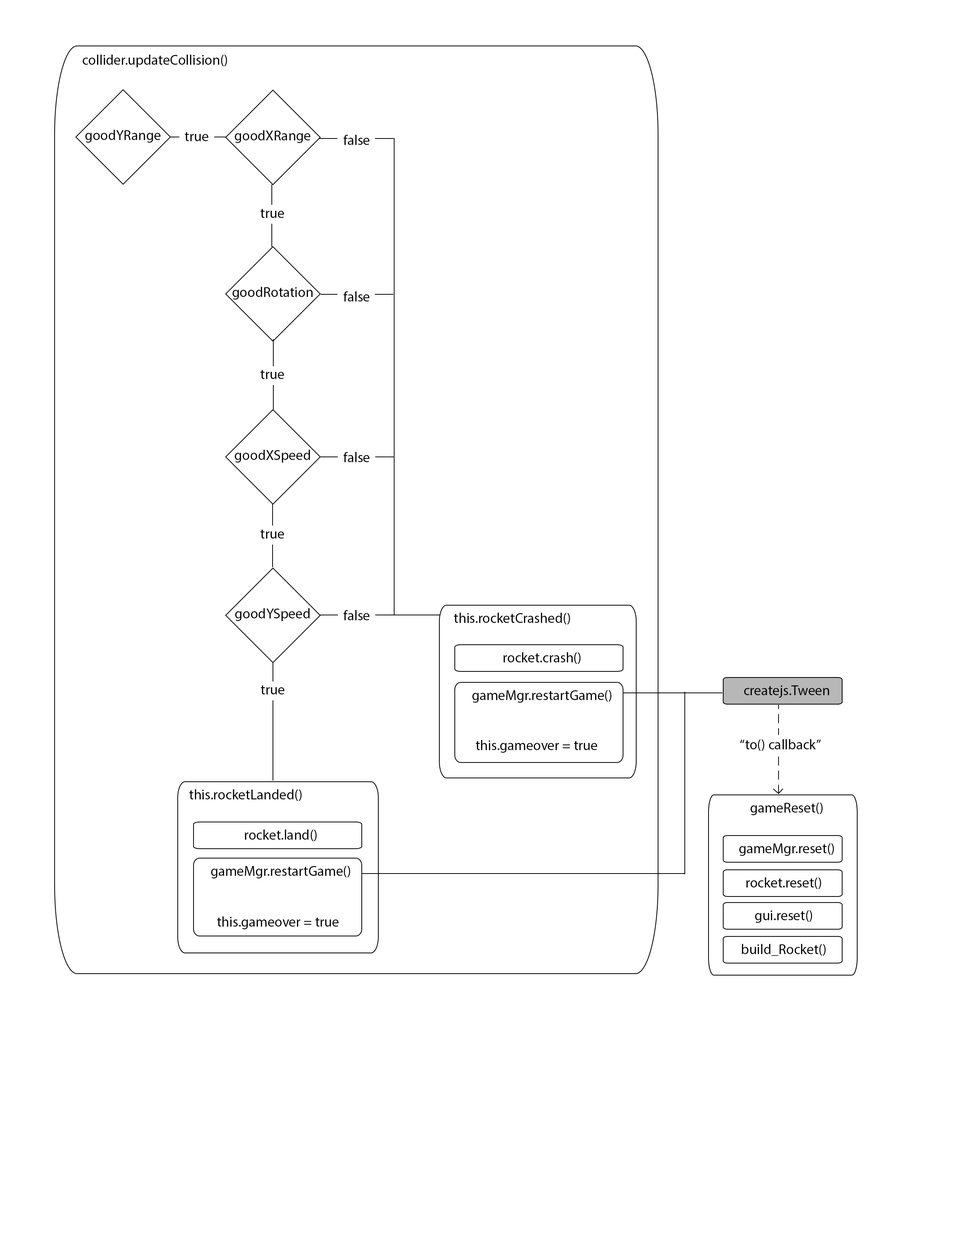
<style>
.page{position:relative;width:960px;height:1242px;background:#ffffff}
.page>*{position:absolute;margin:0}
.t1{font:14.1px "MyriadPro-Regular";color:#000000}
</style>
<div class="page">
<p class="t1" style="left:82px;top:55px;width:145px;height:12px">collider.updateCollision()</p>
<p class="t1" style="left:85px;top:130px;width:76px;height:13px">goodYRange</p>
<p class="t1" style="left:185px;top:132px;width:24px;height:9px">true</p>
<p class="t1" style="left:235px;top:130px;width:76px;height:13px">goodXRange</p>
<p class="t1" style="left:343px;top:135px;width:27px;height:10px">false</p>
<p class="t1" style="left:260px;top:209px;width:24px;height:9px">true</p>
<p class="t1" style="left:232px;top:287px;width:81px;height:13px">goodRotation</p>
<p class="t1" style="left:343px;top:291px;width:27px;height:11px">false</p>
<p class="t1" style="left:260px;top:370px;width:24px;height:9px">true</p>
<p class="t1" style="left:235px;top:450px;width:75px;height:13px">goodXSpeed</p>
<p class="t1" style="left:343px;top:452px;width:27px;height:10px">false</p>
<p class="t1" style="left:260px;top:529px;width:24px;height:10px">true</p>
<p class="t1" style="left:235px;top:608px;width:75px;height:13px">goodYSpeed</p>
<p class="t1" style="left:343px;top:610px;width:27px;height:10px">false</p>
<p class="t1" style="left:454px;top:613px;width:116px;height:12px">this.rocketCrashed()</p>
<p class="t1" style="left:503px;top:652px;width:77px;height:12px">rocket.crash()</p>
<p class="t1" style="left:261px;top:685px;width:24px;height:10px">true</p>
<p class="t1" style="left:744px;top:685px;width:85px;height:13px">createjs.Tween</p>
<p class="t1" style="left:472px;top:690px;width:139px;height:13px">gameMgr.restartGame()</p>
<p class="t1" style="left:476px;top:740px;width:121px;height:13px">this.gameover = true</p>
<p class="t1" style="left:740px;top:739px;width:81px;height:12px">“to() callback”</p>
<p class="t1" style="left:189px;top:789px;width:113px;height:12px">this.rocketLanded()</p>
<p class="t1" style="left:750px;top:803px;width:73px;height:12px">gameReset()</p>
<p class="t1" style="left:245px;top:830px;width:72px;height:11px">rocket.land()</p>
<p class="t1" style="left:739px;top:843px;width:95px;height:13px">gameMgr.reset()</p>
<p class="t1" style="left:211px;top:866px;width:139px;height:13px">gameMgr.restartGame()</p>
<p class="t1" style="left:746px;top:877px;width:75px;height:12px">rocket.reset()</p>
<p class="t1" style="left:217px;top:917px;width:122px;height:12px">this.gameover = true</p>
<p class="t1" style="left:755px;top:910px;width:57px;height:13px">gui.reset()</p>
<p class="t1" style="left:742px;top:944px;width:84px;height:12px">build_Rocket()</p>
</div>
